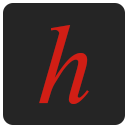
<style>
.page{position:relative;width:128px;height:128px;background:#252525}
.page>*{position:absolute;margin:0}
.t1{font:140px "Aparajita-Italic";color:#d11e15}
</style>
<div class="page">
<p class="t1" style="left:39px;top:25px;width:50px;height:79px">h</p>
</div>
